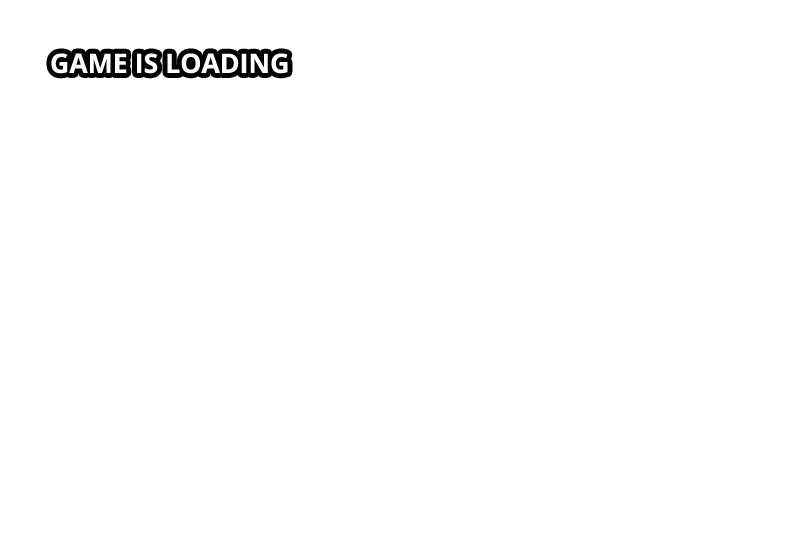
<style>
.page{position:relative;width:800px;height:540px;background:#ffffff}
.page>*{position:absolute;margin:0}
.t1{font:26.7px "OpenSans-Bold";color:#ffffff}
</style>
<div class="page">
<p class="t1" style="left:51px;top:53px;width:237px;height:21px">GAME IS LOADING</p>
</div>
